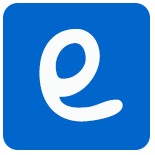
<style>
.page{position:relative;width:155px;height:155px;background:#0066cc}
.page>*{position:absolute;margin:0}
.t1{font:147px "GloriaHallelujah";color:#fafcfb}
</style>
<div class="page">
<p class="t1" style="left:39px;top:29px;width:84px;height:93px;rotate:-7deg">e</p>
</div>
